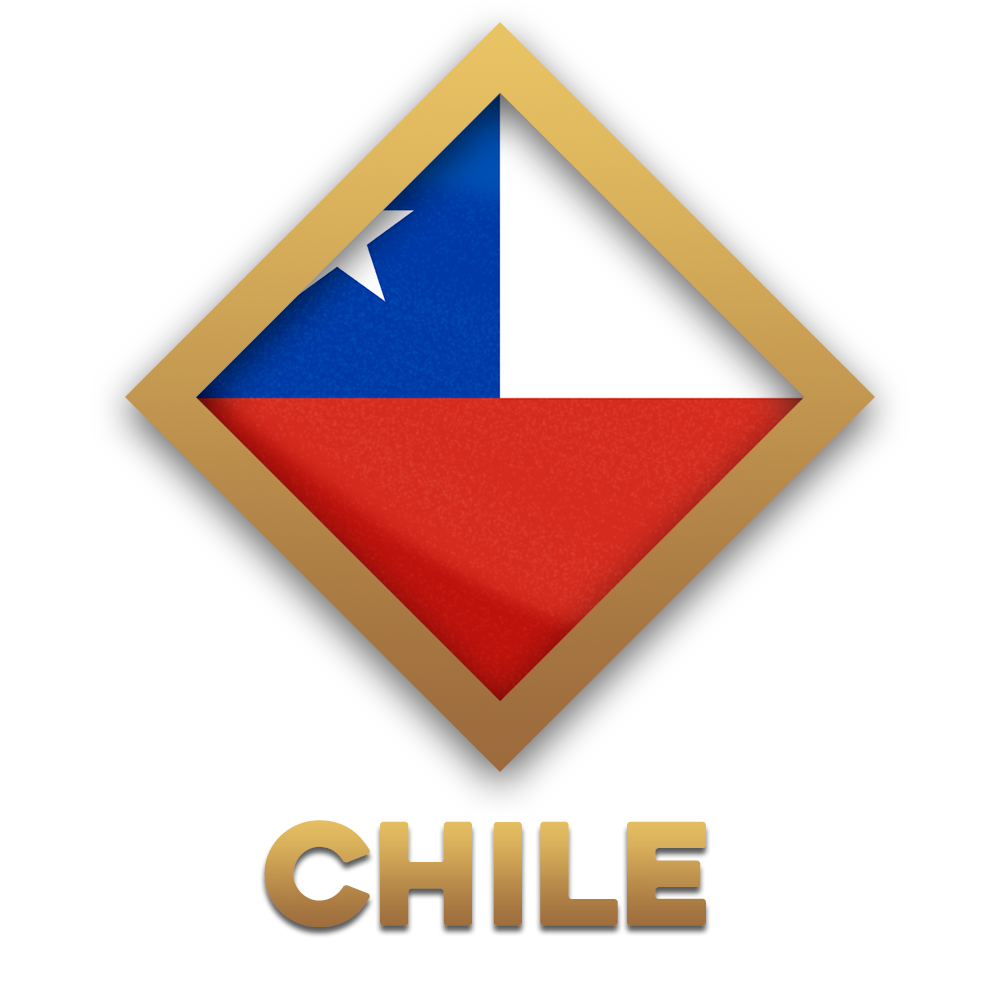
<style>
.page{position:relative;width:1000px;height:1000px;background:#ffffff}
.page>*{position:absolute;margin:0}
.t1{font:141px "Heavitas"}
</style>
<div class="page">
<p class="t1" style="left:264px;top:820px;width:442px;height:107px">chile</p>
</div>
